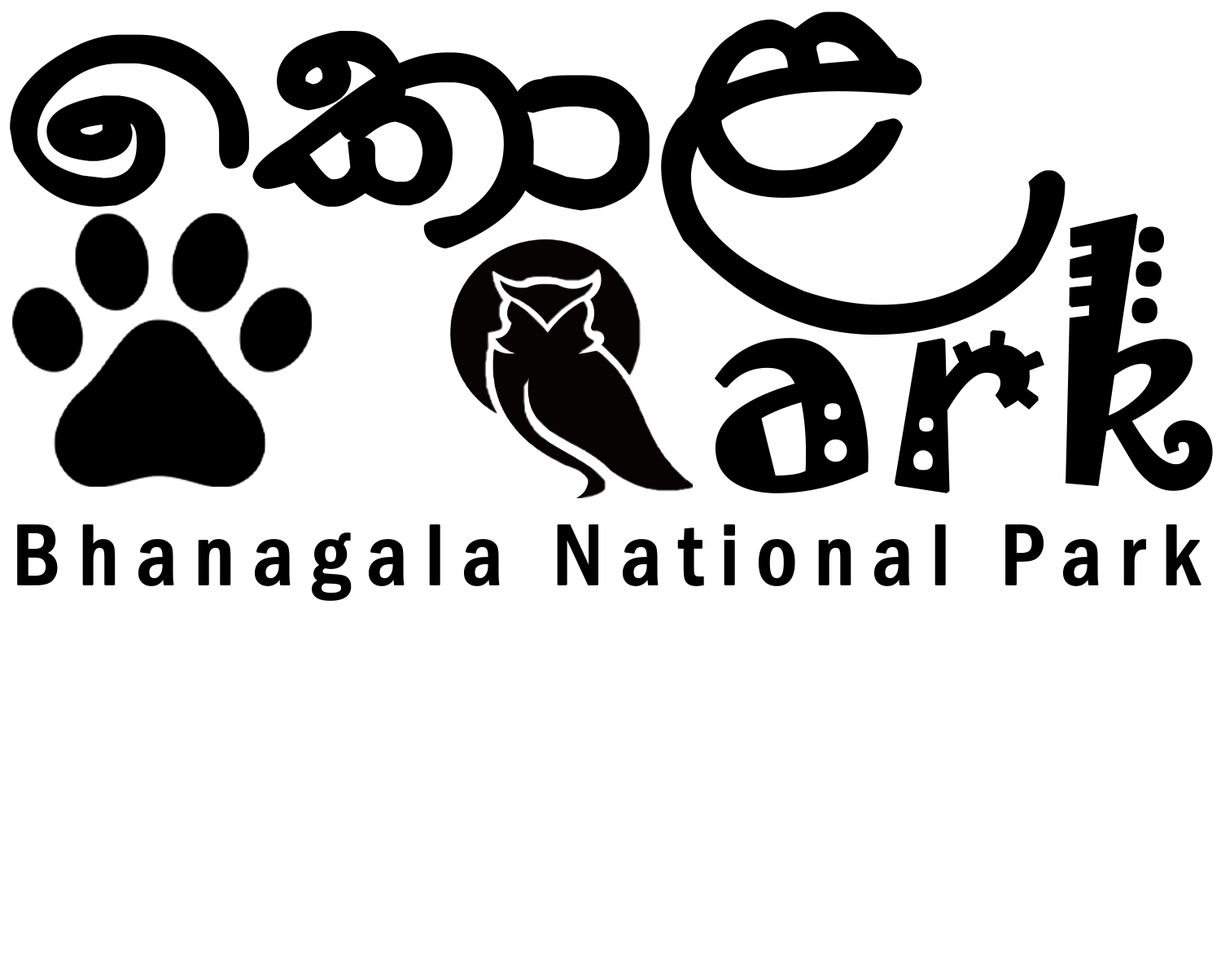
<style>
.page{position:relative;width:1221px;height:977px;background:#ffffff}
.page>*{position:absolute;margin:0}
.t1{font:475.5px "apex-a.pura-008";color:#000000;font-weight:bold}
.t2{font:300.9px "Jokerman-Regular";color:#000000;font-weight:bold}
.t3{font:89.7px "FranklinGothic-MediumCond";letter-spacing:0.16em;color:#000000;font-weight:bold}
</style>
<div class="page">
<p class="t1" style="left:10px;top:11px;width:1055px;height:324px">fld&lt;</p>
<p class="t2" style="left:714px;top:213px;width:499px;height:280px">ark</p>
<p class="t3" style="left:17px;top:524px;width:1184px;height:77px">Bhanagala National Park</p>
</div>
